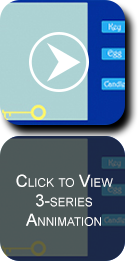
<style>
.page{position:relative;width:139px;height:271px}
.page>*{position:absolute;margin:0}
.t1{font:16.7px/19.4px "ArialMT";color:#ffffff;font-variant:small-caps}
</style>
<div class="page">
<p class="t1" style="left:16px;top:174px;width:97px;height:52px;text-align:center">Click to View 3-series Annimation</p>
</div>
